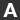
<style>
.page{position:relative;width:20px;height:20px;background:#333333}
.page>*{position:absolute;margin:0}
.t1{font:20px "HelveticaNeue-Bold";color:#ffffff}
</style>
<div class="page">
<p class="t1" style="left:3px;top:3px;width:15px;height:14px">A</p>
</div>
